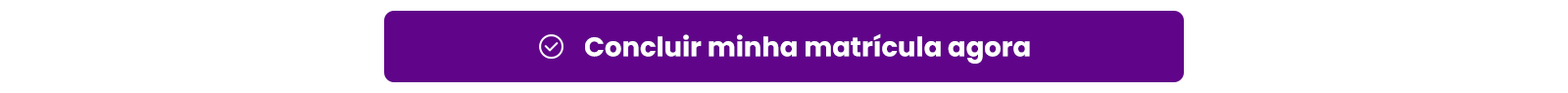
<style>
.page{position:relative;width:1568px;height:93px;background:#ffffff}
.page>*{position:absolute;margin:0}
.t1{font:26.9px "Poppins-Bold";color:#ffffff}
</style>
<div class="page">
<p class="t1" style="left:585px;top:33px;width:445px;height:31px">Concluir minha matrícula agora</p>
</div>
